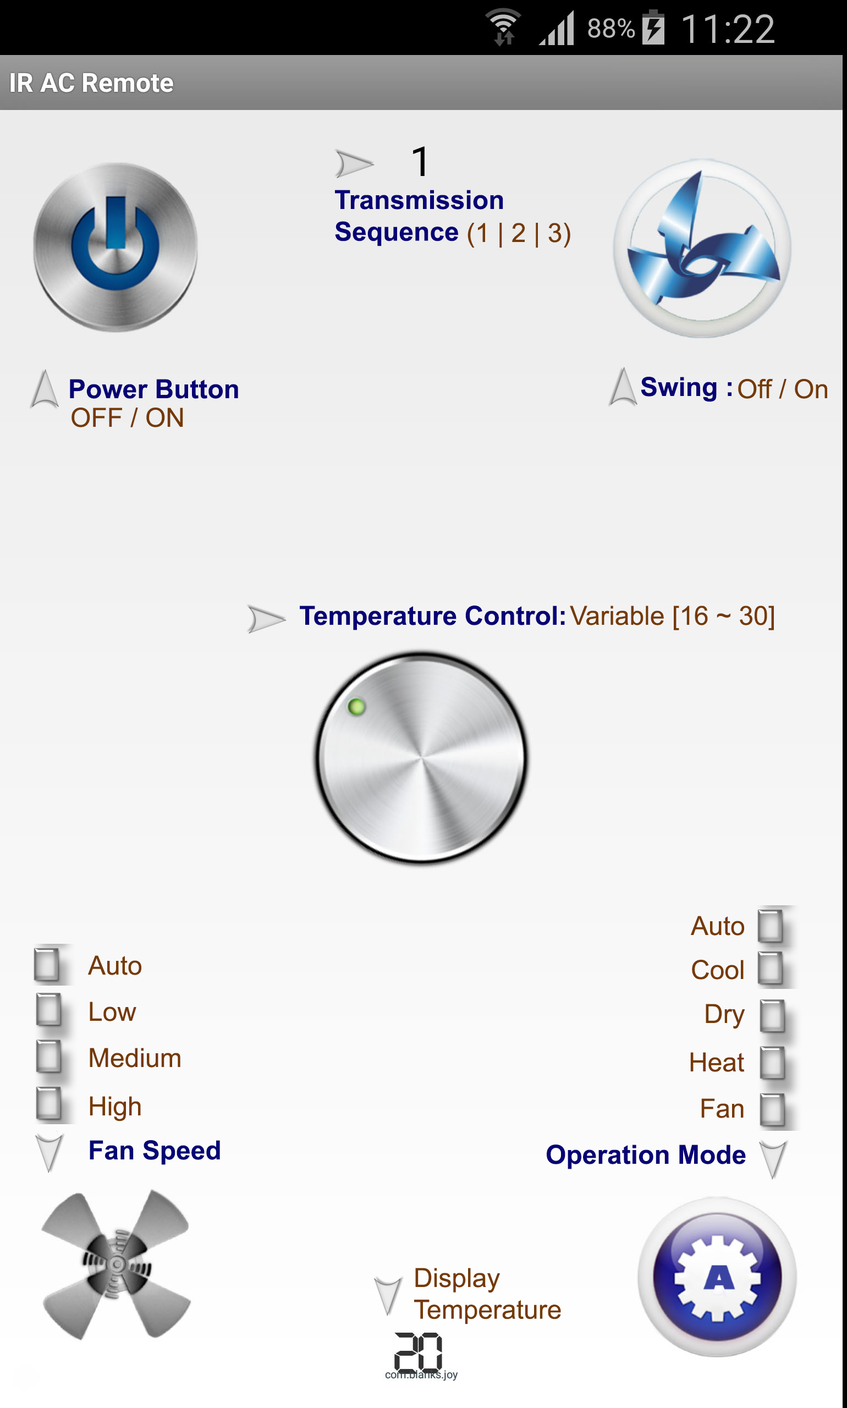
<style>
.page{position:relative;width:847px;height:1408px}
.page>*{position:absolute;margin:0}
.t1{font:26.4px "Arial-BoldMT";color:#080375}
.t2{font:26.4px "ArialMT";color:#753903}
.t3{font:26.4px "Arial-BoldMT";color:#030875}
</style>
<div class="page">
<p class="t1" style="left:335px;top:190px;width:168px;height:56px">Transmission<br>Sequence</p>
<p class="t2" style="left:467px;top:223px;width:103px;height:25px">(1 | 2 | 3)</p>
<p class="t1" style="left:641px;top:377px;width:90px;height:25px">Swing :</p>
<p class="t1" style="left:70px;top:379px;width:168px;height:20px">Power Button</p>
<p class="t2" style="left:738px;top:379px;width:89px;height:20px">Off / On</p>
<p class="t2" style="left:71px;top:408px;width:112px;height:19px">OFF / ON</p>
<p class="t1" style="left:300px;top:606px;width:265px;height:24px">Temperature Control:</p>
<p class="t2" style="left:570px;top:606px;width:204px;height:24px">Variable [16 ~ 30]</p>
<p class="t2" style="left:690px;top:916px;width:54px;height:19px">Auto</p>
<p class="t2" style="left:87px;top:955px;width:54px;height:20px">Auto</p>
<p class="t2" style="left:692px;top:960px;width:52px;height:19px">Cool</p>
<p class="t2" style="left:90px;top:1001px;width:46px;height:20px">Low</p>
<p class="t2" style="left:706px;top:1004px;width:39px;height:25px">Dry</p>
<p class="t2" style="left:90px;top:1048px;width:90px;height:19px">Medium</p>
<p class="t2" style="left:690px;top:1052px;width:55px;height:20px">Heat</p>
<p class="t2" style="left:90px;top:1096px;width:51px;height:25px">High</p>
<p class="t2" style="left:701px;top:1098px;width:43px;height:20px">Fan</p>
<p class="t3" style="left:90px;top:1140px;width:130px;height:25px">Fan Speed</p>
<p class="t1" style="left:547px;top:1144px;width:199px;height:25px">Operation Mode</p>
<p class="t2" style="left:414px;top:1268px;width:147px;height:56px">Display<br>Temperature</p>
</div>
